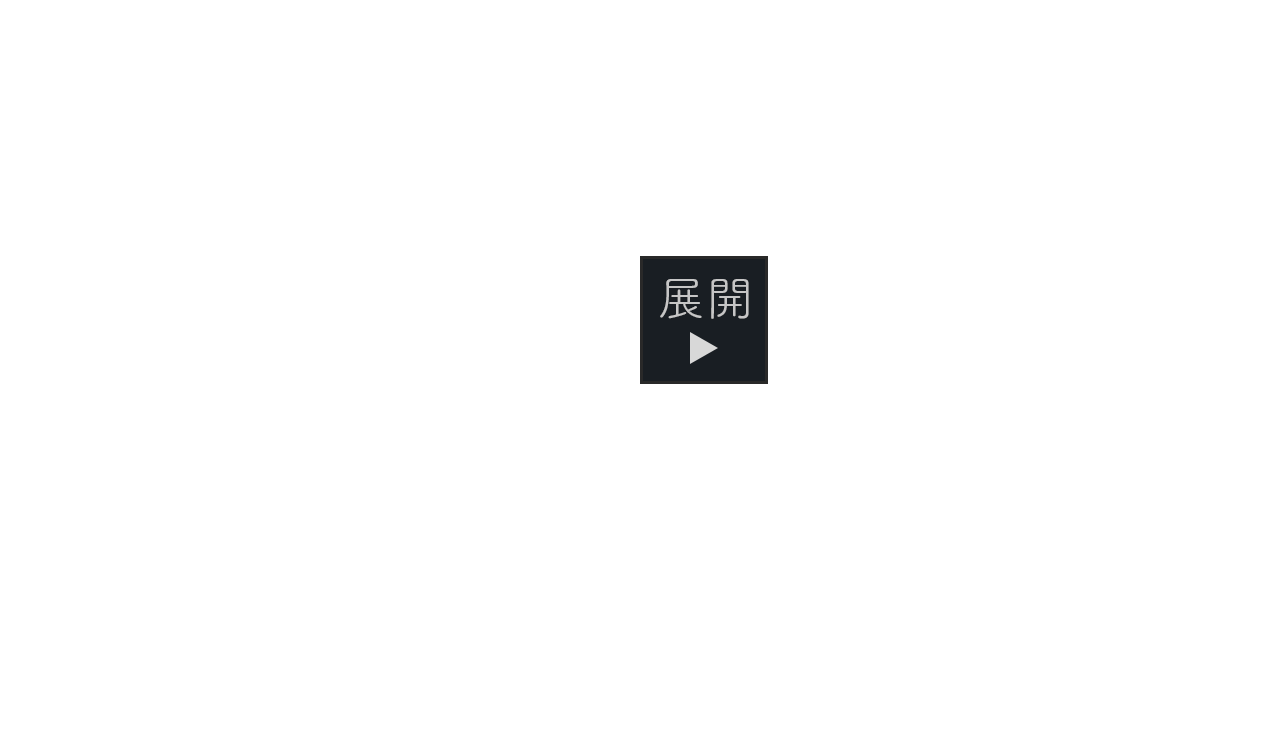
<style>
.page{position:relative;width:1282px;height:752px;background:#ffffff}
.page>*{position:absolute;margin:0}
.t1{font:48px "TsukuARdGothicStd-R";color:#c6c6c6}
</style>
<div class="page">
<p class="t1" style="left:660px;top:279px;width:89px;height:40px">展開</p>
</div>
